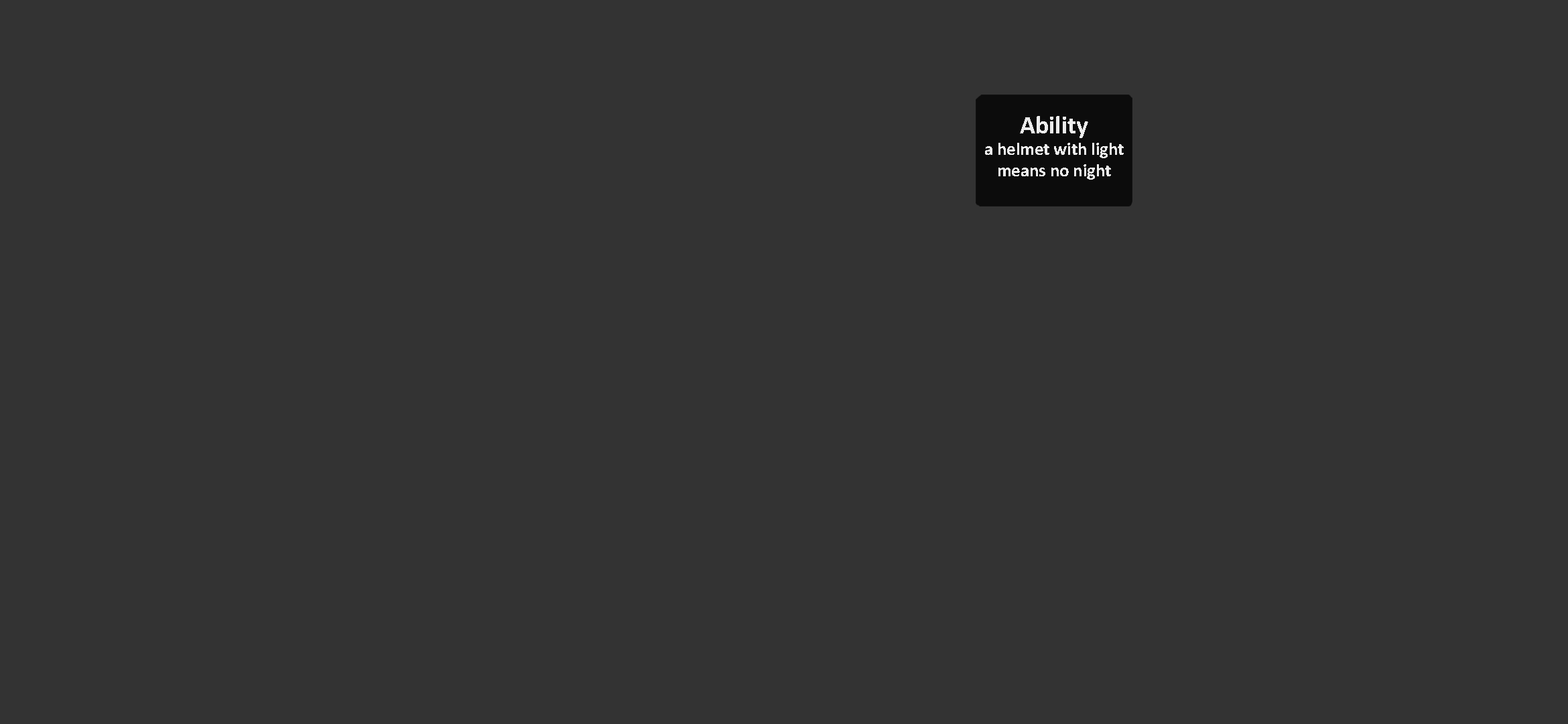
<style>
.page{position:relative;width:1568px;height:724px;background:#333333}
.page>*{position:absolute;margin:0}
.t1{font:17.9px "Calibri-Bold";color:#ffffff}
.t2{font:25.5px "Calibri-Bold";color:#ffffff}
</style>
<div class="page">
<p class="t1" style="left:985px;top:116px;width:139px;height:64px;text-align:center;opacity:0.89"><span class="t2">Ability<br></span>a helmet with light <br>means no night</p>
</div>
